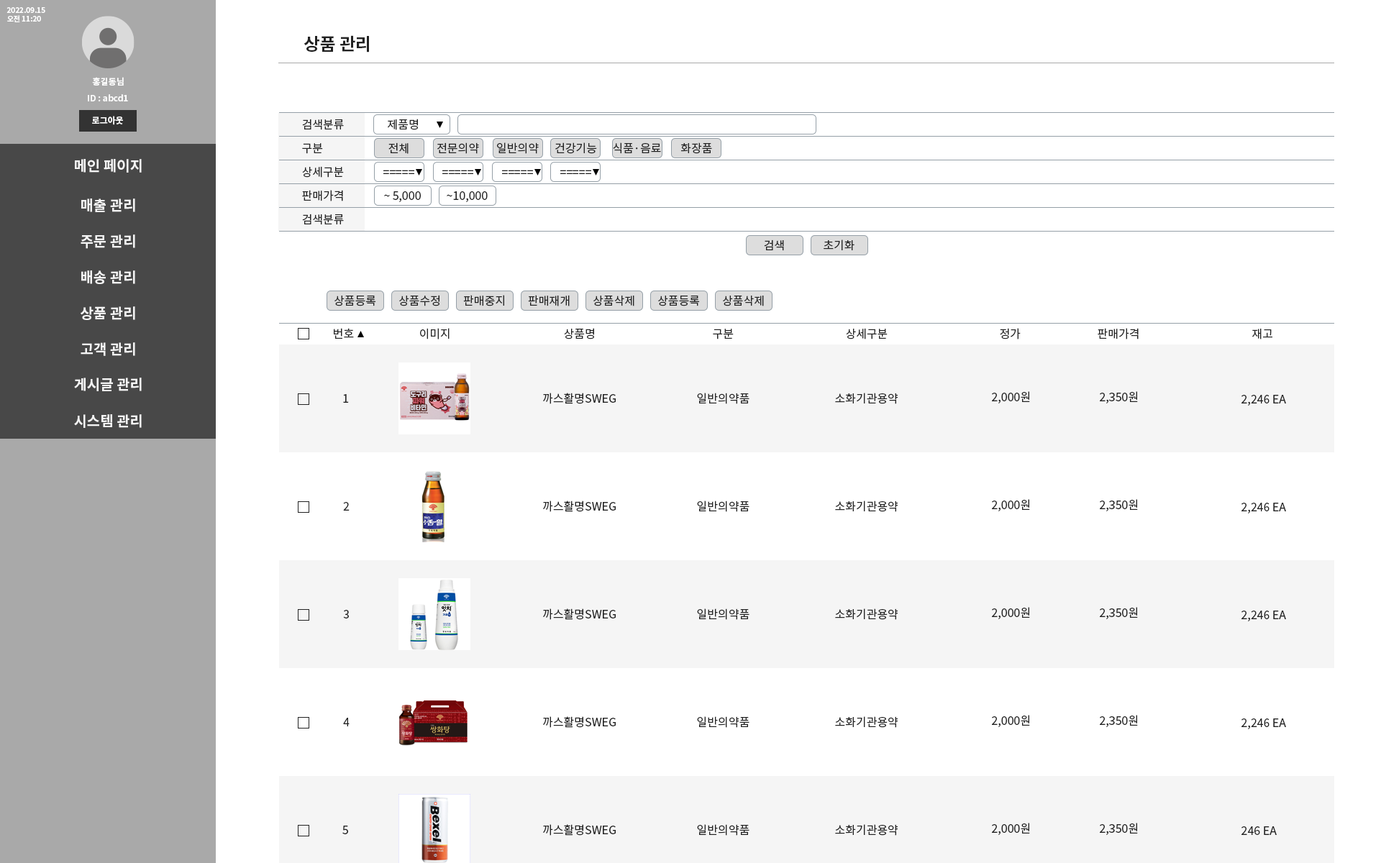
<style>
.page{position:relative;width:1381px;height:863px;background:#ffffff}
.page>*{position:absolute;margin:0}
.t1{font:7.2px "NotoSansKR-Bold";color:#ffffff}
.t2{font:17.3px "NotoSansKR-Bold";color:#222222}
.t3{font:8.6px "NotoSansKR-Bold";color:#ffffff}
.t4{font:11.5px "NotoSansKR-Regular";color:#222222}
.t5{font:14.4px "NotoSansKR-Bold";color:#f5f5f5}
</style>
<div class="page">
<p class="t1" style="left:6px;top:7px;width:39px;height:6px">2022.09.15</p>
<p class="t1" style="left:7px;top:15px;width:34px;height:7px">오전 11:20</p>
<p class="t2" style="left:304px;top:35px;width:65px;height:18px">상품 관리</p>
<p class="t3" style="left:92px;top:77px;width:32px;height:9px">홍길동님</p>
<p class="t3" style="left:88px;top:94px;width:40px;height:7px">ID : abcd1</p>
<p class="t3" style="left:92px;top:116px;width:31px;height:9px">로그아웃</p>
<p class="t4" style="left:302px;top:119px;width:42px;height:11px">검색분류</p>
<p class="t4" style="left:388px;top:119px;width:30px;height:11px">제품명</p>
<p class="t4" style="left:302px;top:143px;width:21px;height:11px">구분</p>
<p class="t4" style="left:388px;top:142px;width:21px;height:12px">전체</p>
<p class="t4" style="left:437px;top:142px;width:42px;height:12px">전문의약</p>
<p class="t4" style="left:497px;top:142px;width:42px;height:12px">일반의약</p>
<p class="t4" style="left:555px;top:142px;width:42px;height:12px">건강기능</p>
<p class="t4" style="left:613px;top:142px;width:48px;height:12px">식품·음료</p>
<p class="t4" style="left:681px;top:142px;width:31px;height:12px">화장품</p>
<p class="t5" style="left:75px;top:159px;width:67px;height:14px">메인 페이지</p>
<p class="t4" style="left:302px;top:166px;width:42px;height:12px">상세구분</p>
<p class="t4" style="left:383px;top:170px;width:31px;height:4px">=====</p>
<p class="t4" style="left:442px;top:170px;width:31px;height:4px">=====</p>
<p class="t4" style="left:502px;top:170px;width:31px;height:4px">=====</p>
<p class="t4" style="left:560px;top:170px;width:31px;height:4px">=====</p>
<p class="t4" style="left:302px;top:190px;width:41px;height:11px">판매가격</p>
<p class="t4" style="left:384px;top:191px;width:37px;height:11px">~ 5,000</p>
<p class="t4" style="left:447px;top:191px;width:41px;height:11px">~10,000</p>
<p class="t5" style="left:81px;top:199px;width:54px;height:13px">매출 관리</p>
<p class="t4" style="left:302px;top:214px;width:42px;height:11px">검색분류</p>
<p class="t5" style="left:81px;top:235px;width:54px;height:14px">주문 관리</p>
<p class="t4" style="left:764px;top:240px;width:20px;height:11px">검색</p>
<p class="t4" style="left:824px;top:240px;width:31px;height:10px">초기화</p>
<p class="t5" style="left:81px;top:270px;width:54px;height:14px">배송 관리</p>
<p class="t4" style="left:335px;top:296px;width:41px;height:10px">상품등록</p>
<p class="t4" style="left:399px;top:295px;width:41px;height:11px">상품수정</p>
<p class="t4" style="left:463px;top:295px;width:41px;height:11px">판매중지</p>
<p class="t4" style="left:528px;top:295px;width:42px;height:11px">판매재개</p>
<p class="t4" style="left:594px;top:296px;width:41px;height:10px">상품삭제</p>
<p class="t4" style="left:658px;top:296px;width:42px;height:10px">상품등록</p>
<p class="t4" style="left:723px;top:296px;width:41px;height:10px">상품삭제</p>
<p class="t5" style="left:81px;top:306px;width:54px;height:14px">상품 관리</p>
<p class="t4" style="left:334px;top:328px;width:20px;height:11px">번호</p>
<p class="t4" style="left:420px;top:328px;width:30px;height:12px">이미지</p>
<p class="t4" style="left:564px;top:328px;width:30px;height:12px">상품명</p>
<p class="t4" style="left:713px;top:329px;width:21px;height:11px">구분</p>
<p class="t4" style="left:846px;top:328px;width:42px;height:12px">상세구분</p>
<p class="t4" style="left:1000px;top:328px;width:21px;height:12px">정가</p>
<p class="t4" style="left:1098px;top:328px;width:41px;height:12px">판매가격</p>
<p class="t4" style="left:1252px;top:329px;width:21px;height:11px">재고</p>
<p class="t5" style="left:81px;top:342px;width:54px;height:14px">고객 관리</p>
<p class="t5" style="left:74px;top:378px;width:68px;height:13px">게시글 관리</p>
<p class="t4" style="left:343px;top:394px;width:6px;height:9px">1</p>
<p class="t4" style="left:543px;top:393px;width:73px;height:11px">까스활명SWEG</p>
<p class="t4" style="left:697px;top:393px;width:53px;height:11px">일반의약품</p>
<p class="t4" style="left:835px;top:393px;width:64px;height:11px">소화기관용약</p>
<p class="t4" style="left:992px;top:391px;width:38px;height:13px">2,000원</p>
<p class="t4" style="left:1100px;top:391px;width:38px;height:13px">2,350원</p>
<p class="t4" style="left:1242px;top:395px;width:44px;height:11px">2,246 EA</p>
<p class="t5" style="left:74px;top:414px;width:68px;height:14px">시스템 관리</p>
<p class="t4" style="left:343px;top:502px;width:7px;height:9px">2</p>
<p class="t4" style="left:543px;top:501px;width:73px;height:11px">까스활명SWEG</p>
<p class="t4" style="left:697px;top:501px;width:53px;height:11px">일반의약품</p>
<p class="t4" style="left:835px;top:501px;width:64px;height:11px">소화기관용약</p>
<p class="t4" style="left:992px;top:499px;width:38px;height:12px">2,000원</p>
<p class="t4" style="left:1100px;top:499px;width:38px;height:12px">2,350원</p>
<p class="t4" style="left:1242px;top:503px;width:44px;height:11px">2,246 EA</p>
<p class="t4" style="left:343px;top:610px;width:6px;height:9px">3</p>
<p class="t4" style="left:543px;top:609px;width:73px;height:11px">까스활명SWEG</p>
<p class="t4" style="left:697px;top:609px;width:53px;height:11px">일반의약품</p>
<p class="t4" style="left:835px;top:609px;width:64px;height:11px">소화기관용약</p>
<p class="t4" style="left:992px;top:607px;width:38px;height:12px">2,000원</p>
<p class="t4" style="left:1100px;top:607px;width:38px;height:12px">2,350원</p>
<p class="t4" style="left:1242px;top:611px;width:44px;height:11px">2,246 EA</p>
<p class="t4" style="left:343px;top:718px;width:7px;height:9px">4</p>
<p class="t4" style="left:543px;top:717px;width:73px;height:11px">까스활명SWEG</p>
<p class="t4" style="left:697px;top:717px;width:53px;height:11px">일반의약품</p>
<p class="t4" style="left:835px;top:717px;width:64px;height:11px">소화기관용약</p>
<p class="t4" style="left:992px;top:715px;width:38px;height:12px">2,000원</p>
<p class="t4" style="left:1100px;top:715px;width:38px;height:12px">2,350원</p>
<p class="t4" style="left:1242px;top:719px;width:44px;height:10px">2,246 EA</p>
<p class="t4" style="left:342px;top:826px;width:6px;height:9px">5</p>
<p class="t4" style="left:543px;top:824px;width:73px;height:12px">까스활명SWEG</p>
<p class="t4" style="left:697px;top:824px;width:53px;height:12px">일반의약품</p>
<p class="t4" style="left:835px;top:824px;width:64px;height:12px">소화기관용약</p>
<p class="t4" style="left:992px;top:823px;width:38px;height:12px">2,000원</p>
<p class="t4" style="left:1100px;top:823px;width:38px;height:12px">2,350원</p>
<p class="t4" style="left:1242px;top:827px;width:35px;height:8px">246 EA</p>
</div>
